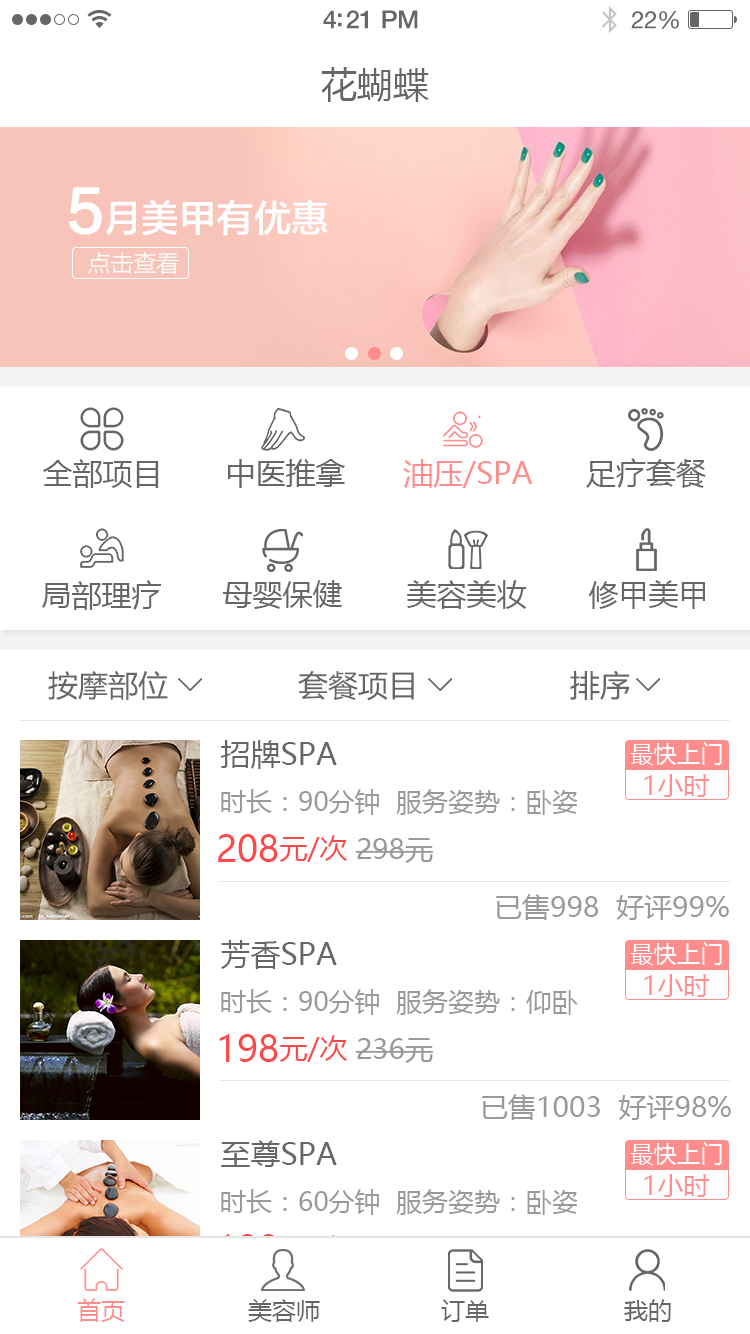
<style>
.page{position:relative;width:750px;height:1334px;background:#ffffff}
.page>*{position:absolute;margin:0}
.t1{font:25px "HelveticaNeue-Medium";letter-spacing:-0.02em;color:#666666}
.t2{font:24px "HelveticaNeue";letter-spacing:-0.02em;color:#666666}
.t3{font:36px "MicrosoftYaHei";color:#666666}
.t4{font:37.4px "FZLTZHK--GBK1-0";color:#ffffff}
.t5{font:58px "FZLTZHK--GBK1-0";color:#ffffff}
.t6{font:23px "FZLTXHJW--GB1-0";color:#ffffff}
.t7{font:30px "MicrosoftYaHei";color:#666666}
.t8{font:30px "MicrosoftYaHei";color:#ff8d8d}
.t9{font:30px "MicrosoftYaHei";color:#666666;text-transform:uppercase}
.t10{font:23.4px "MicrosoftYaHei";color:#ffffff}
.t11{font:26px "MicrosoftYaHei";color:#ff8d8d}
.t12{font:26px "MicrosoftYaHei";color:#999999}
.t13{font:36px "MicrosoftYaHei";color:#fc4a4a}
.t14{font:28px "MicrosoftYaHei";color:#fc4a4a}
.t15{font:28px "MicrosoftYaHei";color:#999999}
.t16{font:24px "MicrosoftYaHei";color:#ff8d8d}
.t17{font:24px "MicrosoftYaHei";color:#666666}
</style>
<div class="page">
<p class="t1" style="left:323px;top:10px;width:95px;height:19px">4:21 PM</p>
<p class="t2" style="left:631px;top:11px;width:48px;height:18px">22%</p>
<p class="t3" style="left:321px;top:67px;width:108px;height:35px">花蝴蝶</p>
<p class="t4" style="left:68px;top:187px;width:260px;height:49px"><span class="t5">5</span>月美甲有优惠</p>
<p class="t6" style="left:88px;top:251px;width:91px;height:23px">点击查看</p>
<p class="t7" style="left:42px;top:459px;width:117px;height:29px">全部项目</p>
<p class="t7" style="left:228px;top:459px;width:117px;height:29px">中医推拿</p>
<p class="t8" style="left:403px;top:459px;width:130px;height:29px">油压/SPA</p>
<p class="t7" style="left:586px;top:458px;width:120px;height:30px">足疗套餐</p>
<p class="t7" style="left:42px;top:580px;width:119px;height:30px">局部理疗</p>
<p class="t7" style="left:223px;top:580px;width:119px;height:29px">母婴保健</p>
<p class="t7" style="left:406px;top:580px;width:121px;height:29px">美容美妆</p>
<p class="t7" style="left:589px;top:580px;width:116px;height:29px">修甲美甲</p>
<p class="t7" style="left:48px;top:671px;width:120px;height:29px">按摩部位</p>
<p class="t7" style="left:298px;top:671px;width:116px;height:30px">套餐项目</p>
<p class="t7" style="left:570px;top:670px;width:60px;height:30px">排序</p>
<p class="t9" style="left:220px;top:740px;width:117px;height:29px"><span class="t7">招牌</span>spa</p>
<p class="t10" style="left:630px;top:742px;width:92px;height:23px">最快上门</p>
<p class="t11" style="left:644px;top:774px;width:66px;height:23px">1小时</p>
<p class="t12" style="left:221px;top:789px;width:357px;height:26px">时长：90分钟  服务姿势：卧姿</p>
<p class="t13" style="left:218px;top:834px;width:60px;height:28px">208</p>
<p class="t14" style="left:279px;top:835px;width:69px;height:27px">元/次</p>
<p class="t15" style="left:355px;top:838px;width:79px;height:25px">298元</p>
<p class="t15" style="left:496px;top:894px;width:233px;height:26px">已售998  好评99%</p>
<p class="t9" style="left:221px;top:940px;width:116px;height:29px"><span class="t7">芳香</span>spa</p>
<p class="t10" style="left:630px;top:942px;width:92px;height:23px">最快上门</p>
<p class="t11" style="left:644px;top:974px;width:66px;height:23px">1小时</p>
<p class="t12" style="left:221px;top:989px;width:357px;height:26px">时长：90分钟  服务姿势：仰卧</p>
<p class="t13" style="left:219px;top:1034px;width:59px;height:28px">198</p>
<p class="t14" style="left:279px;top:1035px;width:69px;height:27px">元/次</p>
<p class="t15" style="left:355px;top:1038px;width:79px;height:25px">236元</p>
<p class="t15" style="left:482px;top:1094px;width:249px;height:26px">已售1003  好评98%</p>
<p class="t9" style="left:221px;top:1140px;width:116px;height:27px"><span class="t7">至尊</span>spa</p>
<p class="t10" style="left:630px;top:1142px;width:92px;height:23px">最快上门</p>
<p class="t11" style="left:644px;top:1174px;width:66px;height:23px">1小时</p>
<p class="t12" style="left:221px;top:1189px;width:357px;height:26px">时长：60分钟  服务姿势：卧姿</p>
<p class="t16" style="left:77px;top:1298px;width:48px;height:24px">首页</p>
<p class="t17" style="left:248px;top:1299px;width:72px;height:23px">美容师</p>
<p class="t17" style="left:441px;top:1299px;width:48px;height:23px">订单</p>
<p class="t17" style="left:624px;top:1299px;width:47px;height:23px">我的</p>
</div>
